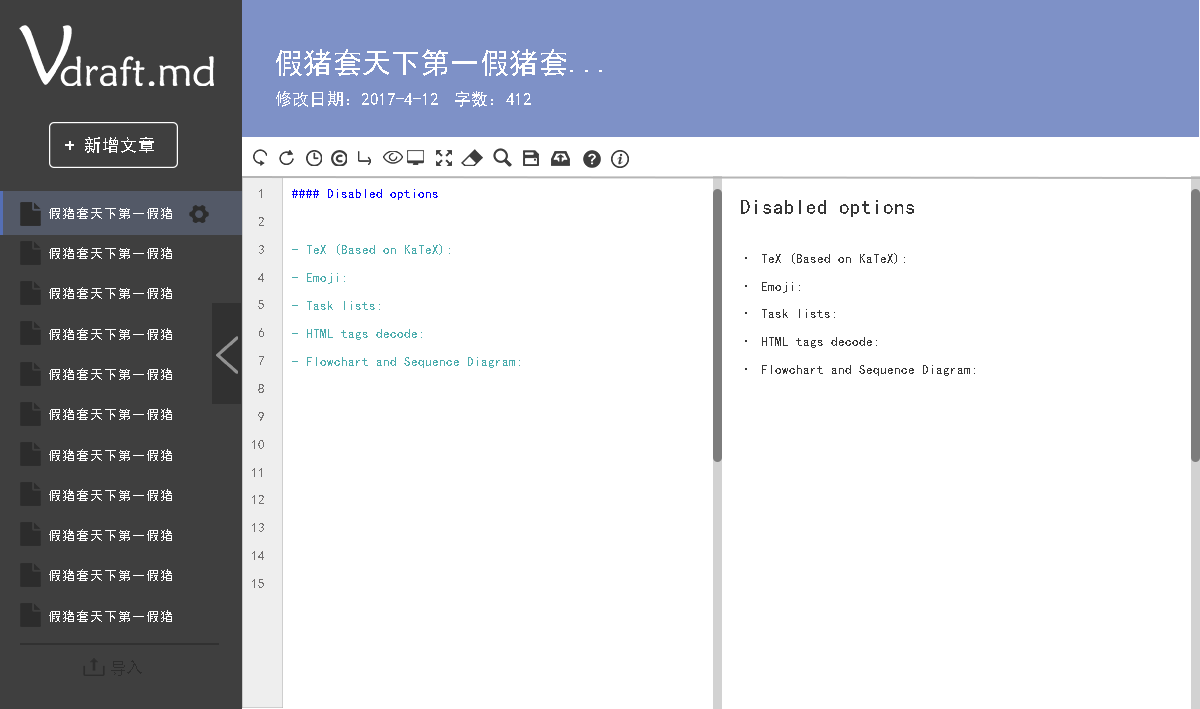
<style>
.page{position:relative;width:1200px;height:709px;background:#ffffff}
.page>*{position:absolute;margin:0}
.t1{font:29.4px "SimHei";color:#ffffff}
.t2{font:17.2px "SimHei";color:#ffffff}
.t3{font:16.7px "SimHei";color:#ffffff}
.t4{font:16.7px "SimHei";color:#ffffff;font-weight:bold}
.t5{font:12.5px "SimHei";color:#727070}
.t6{font:12.5px "SimHei";color:#4aacad}
.t7{font:12.5px "SimHei";color:#0600ff}
.t8{font:12.5px "SimHei";color:#ffffff}
.t9{font:12.5px "SimHei";color:#363636}
.t10{font:20.8px "SimHei";color:#363636}
.t11{font:16.7px "AdobeHeitiStd-Regular";color:#2c2c2c}
</style>
<div class="page">
<p class="t1" style="left:276px;top:49px;width:326px;height:27px">假猪套天下第一假猪套...</p>
<p class="t2" style="left:276px;top:91px;width:162px;height:16px">修改日期：2017-4-12</p>
<p class="t2" style="left:455px;top:91px;width:76px;height:16px">字数：412</p>
<p class="t3" style="left:65px;top:137px;width:89px;height:16px"><span class="t4">+</span> 新增文章</p>
<p class="t5" style="left:259px;top:189px;width:3px;height:9px">1</p>
<p class="t6" style="left:292px;top:189px;width:228px;height:179px"><span class="t7">#### Disabled options<br><br></span>- TeX (Based on KaTeX);<br>- Emoji;<br>- Task lists;<br>- HTML tags decode;<br>- Flowchart and Sequence Diagram;</p>
<p class="t8" style="left:49px;top:207px;width:123px;height:12px">假猪套天下第一假猪</p>
<p class="t9" style="left:741px;top:200px;width:234px;height:176px"><span class="t10">Disabled options<br></span><br>· TeX (Based on KaTeX);<br>· Emoji;<br>· Task lists;<br>· HTML tags decode;<br>· Flowchart and Sequence Diagram;</p>
<p class="t5" style="left:259px;top:217px;width:5px;height:9px">2</p>
<p class="t5" style="left:259px;top:245px;width:5px;height:9px">3</p>
<p class="t8" style="left:49px;top:247px;width:123px;height:12px">假猪套天下第一假猪</p>
<p class="t5" style="left:258px;top:273px;width:6px;height:9px">4</p>
<p class="t8" style="left:49px;top:287px;width:123px;height:12px">假猪套天下第一假猪</p>
<p class="t5" style="left:258px;top:300px;width:6px;height:9px">5</p>
<p class="t8" style="left:49px;top:328px;width:123px;height:12px">假猪套天下第一假猪</p>
<p class="t5" style="left:259px;top:328px;width:5px;height:9px">6</p>
<p class="t5" style="left:259px;top:356px;width:5px;height:9px">7</p>
<p class="t8" style="left:49px;top:368px;width:123px;height:12px">假猪套天下第一假猪</p>
<p class="t5" style="left:258px;top:384px;width:6px;height:9px">8</p>
<p class="t8" style="left:49px;top:408px;width:123px;height:12px">假猪套天下第一假猪</p>
<p class="t5" style="left:258px;top:412px;width:6px;height:9px">9</p>
<p class="t8" style="left:49px;top:449px;width:123px;height:12px">假猪套天下第一假猪</p>
<p class="t5" style="left:252px;top:440px;width:12px;height:9px">10</p>
<p class="t5" style="left:252px;top:468px;width:10px;height:9px">11</p>
<p class="t8" style="left:49px;top:489px;width:123px;height:12px">假猪套天下第一假猪</p>
<p class="t5" style="left:252px;top:495px;width:12px;height:9px">12</p>
<p class="t8" style="left:49px;top:529px;width:123px;height:12px">假猪套天下第一假猪</p>
<p class="t5" style="left:252px;top:523px;width:12px;height:9px">13</p>
<p class="t5" style="left:252px;top:551px;width:12px;height:9px">14</p>
<p class="t8" style="left:49px;top:569px;width:123px;height:12px">假猪套天下第一假猪</p>
<p class="t5" style="left:252px;top:579px;width:12px;height:9px">15</p>
<p class="t8" style="left:49px;top:610px;width:123px;height:12px">假猪套天下第一假猪</p>
<p class="t11" style="left:111px;top:660px;width:31px;height:16px">导入</p>
</div>
